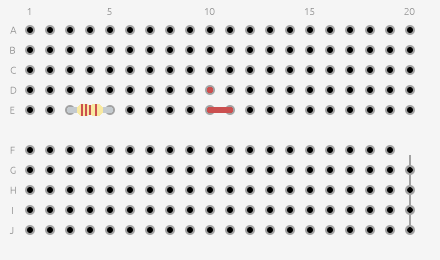
<style>
.page{position:relative;width:440px;height:260px;background:#f5f5f5}
.page>*{position:absolute;margin:0}
.t1{font:10px "Ubuntu-Light";color:#8c8c8c}
.t2{font:10px "Ubuntu-Light"}
</style>
<div class="page">
<p class="t1" style="left:27px;top:8px;width:4px;height:7px">1</p>
<p class="t1" style="left:107px;top:8px;width:5px;height:7px">5</p>
<p class="t1" style="left:205px;top:8px;width:10px;height:7px">10</p>
<p class="t1" style="left:305px;top:8px;width:10px;height:7px">15</p>
<p class="t1" style="left:404px;top:8px;width:11px;height:7px">20</p>
<p class="t1" style="left:10px;top:26px;width:7px;height:8px">A</p>
<p class="t1" style="left:10px;top:46px;width:5px;height:8px">B</p>
<p class="t2" style="left:10px;top:66px;width:6px;height:8px">C</p>
<p class="t2" style="left:10px;top:86px;width:7px;height:8px">D</p>
<p class="t2" style="left:10px;top:106px;width:5px;height:8px">E</p>
<p class="t2" style="left:10px;top:146px;width:5px;height:8px">F</p>
<p class="t2" style="left:10px;top:166px;width:6px;height:8px">G</p>
<p class="t2" style="left:10px;top:186px;width:6px;height:8px">H</p>
<p class="t1" style="left:9px;top:227px;width:5px;height:7px">J</p>
</div>
